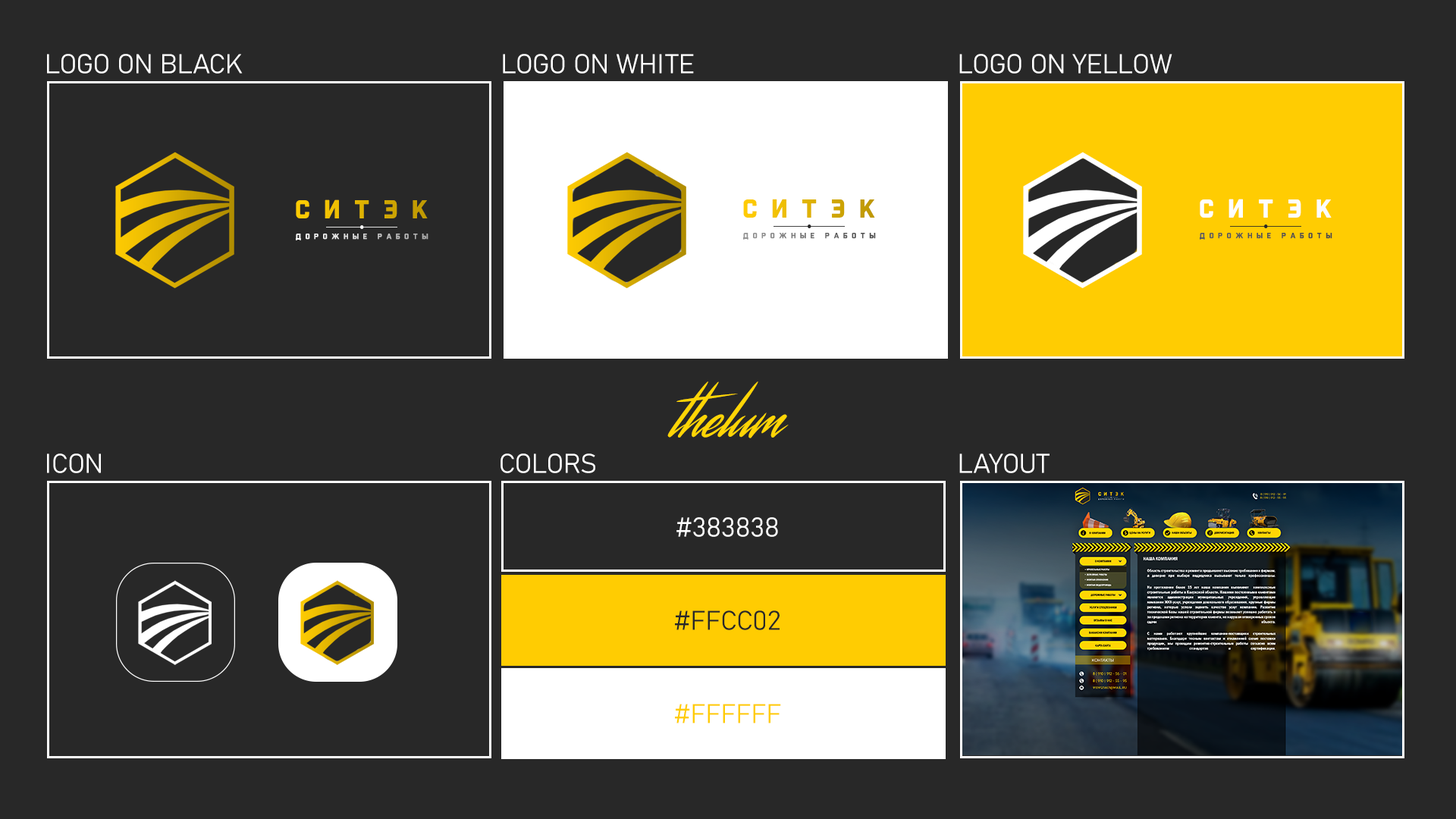
<style>
.page{position:relative;width:1456px;height:819px;background:#282828}
.page>*{position:absolute;margin:0}
.t1{font:26.7px "Bahnschrift-Light";color:#ffffff}
.t2{font:27.1px "ReloadAltCyrilicbySTELORQ-Bold";letter-spacing:0.5em}
.t3{font:27.1px "ReloadAltCyrilicbySTELORQ-Bold";letter-spacing:0.5em;color:#fefefe}
.t4{font:8.1px "ReloadAltCyrilicbySTELORQ-Bold";letter-spacing:0.5em}
.t5{font:8.1px "ReloadAltCyrilicbySTELORQ-Bold";letter-spacing:0.5em;color:#545454}
.t6{font:62.2px "StreamsterRUSBYLYAJKA";color:#ffd505}
.t7{font:26.7px "Bahnschrift-Light";color:#282828}
.t8{font:26.7px "Bahnschrift-Light";color:#ffcc02}
</style>
<div class="page">
<p class="t1" style="left:47px;top:54px;width:196px;height:20px">LOGO ON BLACK</p>
<p class="t1" style="left:503px;top:54px;width:191px;height:20px">LOGO ON WHITE</p>
<p class="t1" style="left:959px;top:54px;width:213px;height:20px">LOGO ON YELLOW</p>
<p class="t2" style="left:296px;top:199px;width:132px;height:19px">Ситэк</p>
<p class="t2" style="left:743px;top:199px;width:132px;height:19px">Ситэк</p>
<p class="t3" style="left:1200px;top:199px;width:132px;height:19px">Ситэк</p>
<p class="t4" style="left:296px;top:234px;width:132px;height:6px">дорожные работы</p>
<p class="t4" style="left:743px;top:233px;width:133px;height:7px">дорожные работы</p>
<p class="t5" style="left:1200px;top:233px;width:132px;height:7px">дорожные работы</p>
<p class="t6" style="left:667px;top:381px;width:122px;height:57px">thelum</p>
<p class="t1" style="left:47px;top:453px;width:54px;height:20px">ICON</p>
<p class="t1" style="left:500px;top:453px;width:95px;height:20px">COLORS</p>
<p class="t1" style="left:959px;top:453px;width:91px;height:20px">LAYOUT</p>
<p class="t1" style="left:676px;top:517px;width:102px;height:20px">#383838</p>
<p class="t7" style="left:675px;top:610px;width:105px;height:20px">#FFCC02</p>
<p class="t8" style="left:675px;top:704px;width:106px;height:19px">#FFFFFF</p>
</div>
